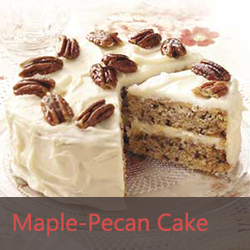
<style>
.page{position:relative;width:250px;height:250px}
.page>*{position:absolute;margin:0}
.t1{font:24px "MicrosoftTaiLe";color:#d64d4c}
</style>
<div class="page">
<p class="t1" style="left:13px;top:212px;width:195px;height:25px">Maple-Pecan Cake</p>
</div>
